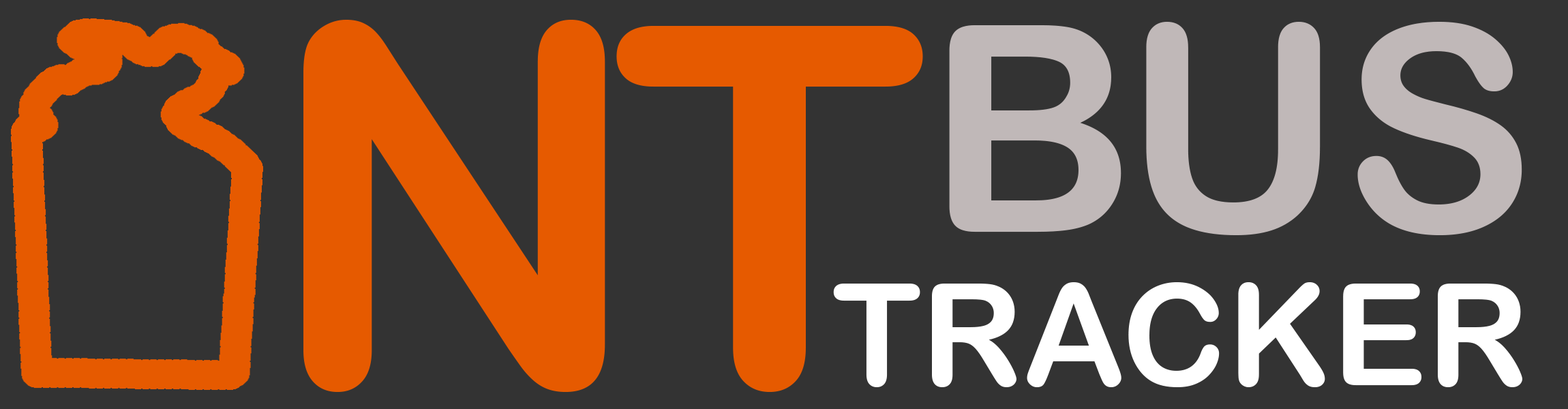
<style>
.page{position:relative;width:1568px;height:409px;background:#333333}
.page>*{position:absolute;margin:0}
.t1{font:502.8px "ArialRoundedMTBold";color:#e65a00}
.t2{font:288.3px "ArialRoundedMTBold";color:#c0b8b8}
.t3{font:142.1px "ArialRoundedMTBold";color:#ffffff}
</style>
<div class="page">
<p class="t1" style="left:303px;top:20px;width:302px;height:372px">N</p>
<p class="t1" style="left:616px;top:26px;width:307px;height:366px">T</p>
<p class="t2" style="left:949px;top:22px;width:573px;height:213px">BUS</p>
<p class="t3" style="left:833px;top:282px;width:689px;height:105px">TRACKER</p>
</div>
